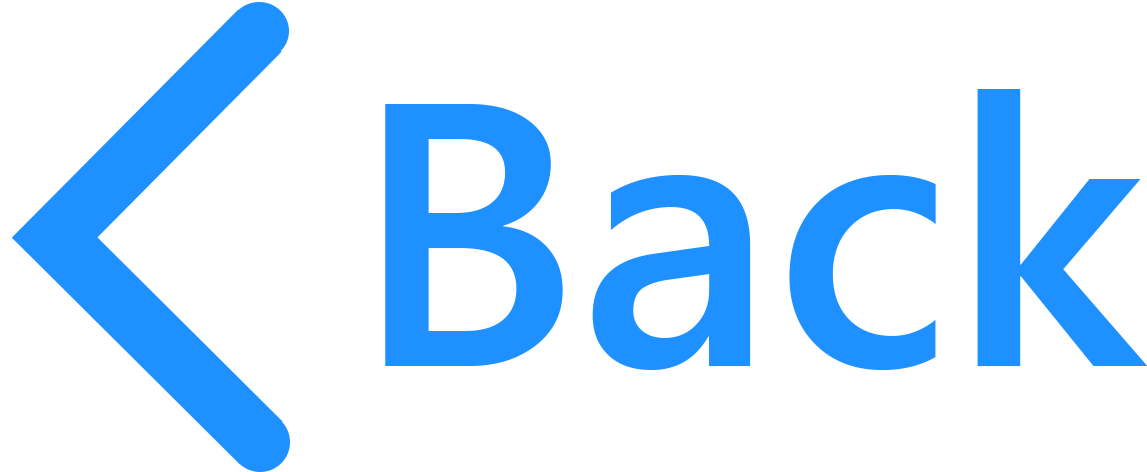
<style>
.page{position:relative;width:1147px;height:472px;background:#ffffff}
.page>*{position:absolute;margin:0}
.t1{font:374px "SegoeUI-Semibold";color:#1e90ff}
</style>
<div class="page">
<p class="t1" style="left:385px;top:89px;width:763px;height:281px">Back</p>
</div>
